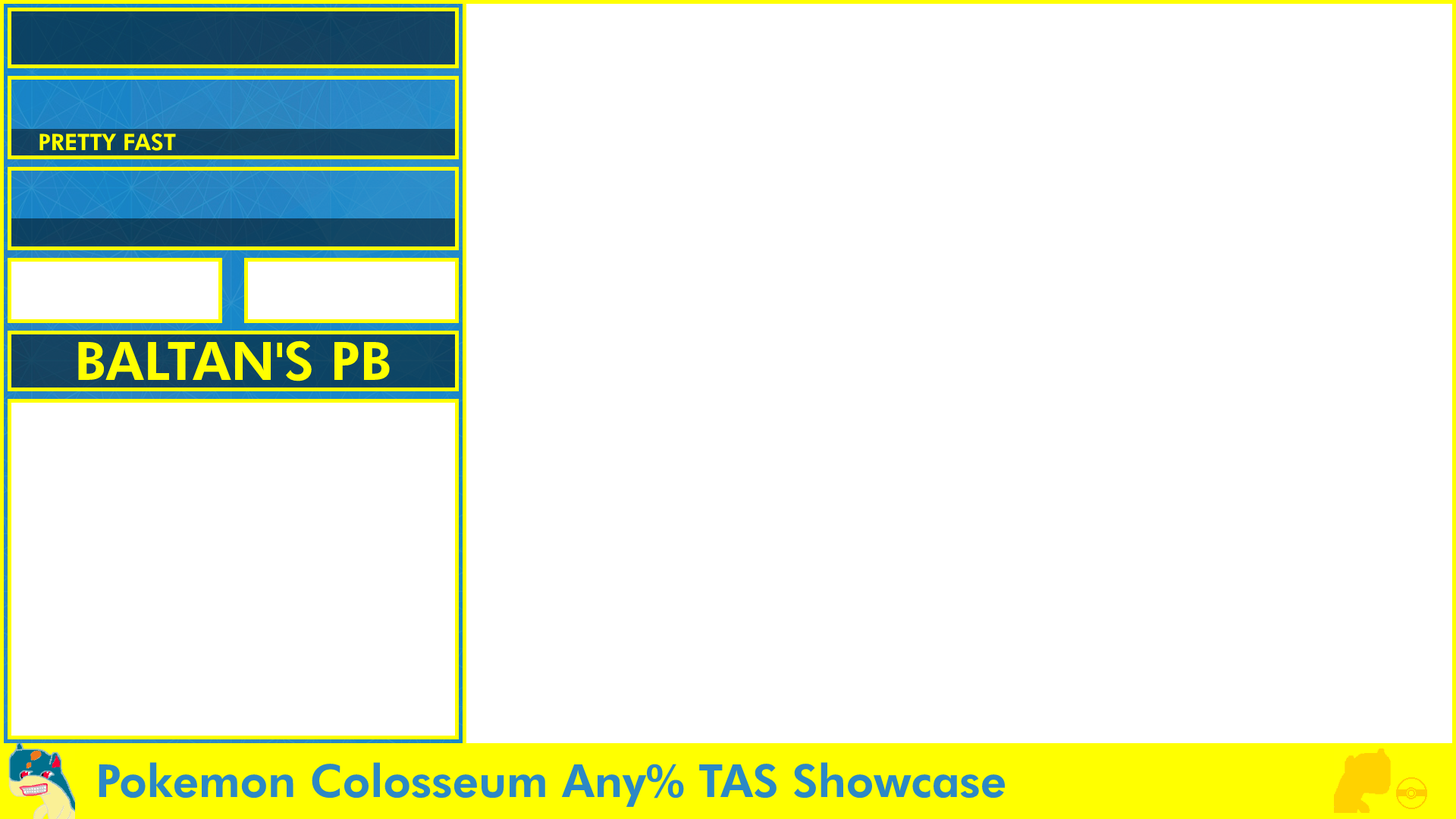
<style>
.page{position:relative;width:1456px;height:819px;background:#ffffff}
.page>*{position:absolute;margin:0}
.t1{font:22.7px "FuturaBT-Heavy";color:#ffff00}
.t2{font:53.1px "FuturaBT-Heavy";color:#ffff00}
.t3{font:45.5px "FuturaBT-Heavy";color:#2c88c5}
</style>
<div class="page">
<p class="t1" style="left:39px;top:133px;width:137px;height:18px">PRETTY FAST</p>
<p class="t2" style="left:78px;top:340px;width:312px;height:41px">BALTAN'S PB</p>
<p class="t3" style="left:99px;top:762px;width:907px;height:46px">Pokemon Colosseum Any% TAS Showcase</p>
</div>
